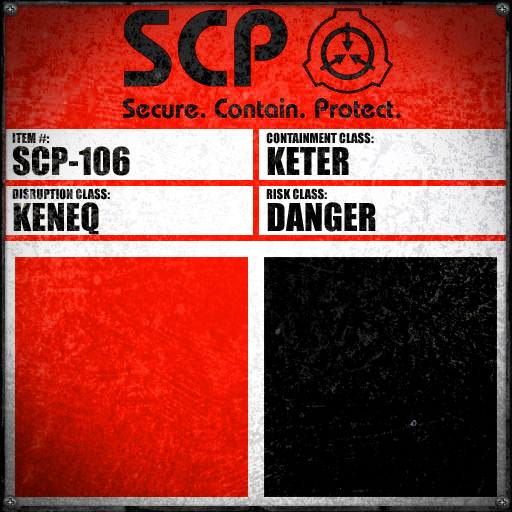
<style>
.page{position:relative;width:512px;height:512px}
.page>*{position:absolute;margin:0}
.t1{font:12.8px "Impact";text-transform:uppercase}
.t2{font:35.6px/32.1px "Impact"}
.t3{font:12.8px "Impact";color:#000000;text-transform:uppercase}
.t4{font:35.6px/32.1px "Impact";color:#000000;text-transform:uppercase}
.t5{font:35.6px/32.1px "Impact";text-transform:uppercase}
</style>
<div class="page">
<p class="t1" style="left:12px;top:133px;width:118px;height:43px">Item #:<br><span class="t2">SCP-106</span></p>
<p class="t3" style="left:266px;top:132px;width:108px;height:43px">Containment Class:<br><span class="t4">Keter</span></p>
<p class="t1" style="left:12px;top:188px;width:98px;height:47px">Disruption Class:<br><span class="t5">keneq</span></p>
<p class="t3" style="left:266px;top:188px;width:110px;height:44px">Risk Class:<br><span class="t4">danger</span></p>
</div>
